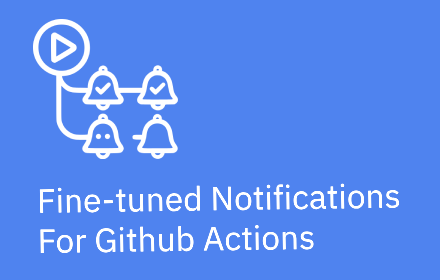
<style>
.page{position:relative;width:440px;height:280px;background:#4f83ef}
.page>*{position:absolute;margin:0}
.t1{font:33.4px "IBMPlexSansThai-Regular";color:#ffffff}
</style>
<div class="page">
<p class="t1" style="left:39px;top:183px;width:361px;height:71px;rotate:-1deg">Fine-tuned Notifications<br>For Github Actions</p>
</div>
